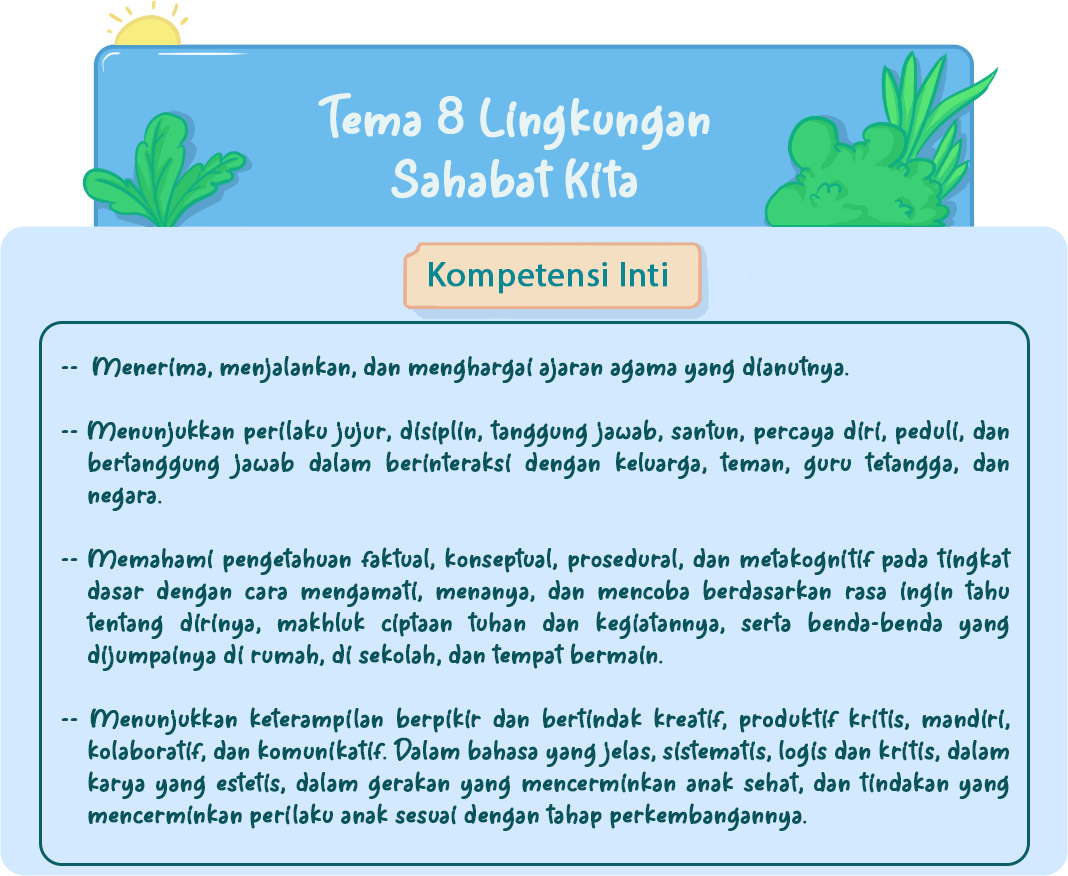
<style>
.page{position:relative;width:1068px;height:876px;background:#d2e9ff}
.page>*{position:absolute;margin:0}
.t1{font:50.7px "Agfolan-Regular";color:#e8f3f4;font-weight:bold}
.t2{font:50.7px "ArialMT";color:#e8f3f4;font-weight:bold}
.t3{font:34.7px "MyriadPro-Regular";color:#088893;font-weight:bold}
.t4{font:26.7px "Agfolan-Regular";color:#08545b;font-weight:bold}
</style>
<div class="page">
<p class="t1" style="left:318px;top:93px;width:392px;height:106px;text-align:center">Tema <span class="t2">8</span> Lingkungan Sahabat Kita</p>
<p class="t3" style="left:429px;top:262px;width:238px;height:32px">Kompetensi Inti</p>
<p class="t4" style="left:61px;top:355px;width:950px;height:476px;text-align:justify">--  Menerima, menjalankan, dan menghargai ajaran agama yang dianutnya.<br><br>-- Menunjukkan perilaku jujur, disiplin, tanggung jawab, santun, percaya diri, peduli, dan bertanggung jawab dalam berinteraksi dengan keluarga, teman, guru tetangga, dan negara.<br><br>-- Memahami pengetahuan faktual, konseptual, prosedural, dan metakognitif pada tingkat dasar dengan cara mengamati, menanya, dan mencoba berdasarkan rasa ingin tahu tentang dirinya, makhluk ciptaan tuhan dan kegiatannya, serta benda-benda yang dijumpainya di rumah, di sekolah, dan tempat bermain.<br><br>-- Menunjukkan keterampilan berpikir dan bertindak kreatif, produktif kritis, mandiri, kolaboratif, dan komunikatif. Dalam bahasa yang jelas, sistematis, logis dan kritis, dalam karya yang estetis, dalam gerakan yang mencerminkan anak sehat, dan tindakan yang mencerminkan perilaku anak sesuai dengan tahap perkembangannya.</p>
</div>
